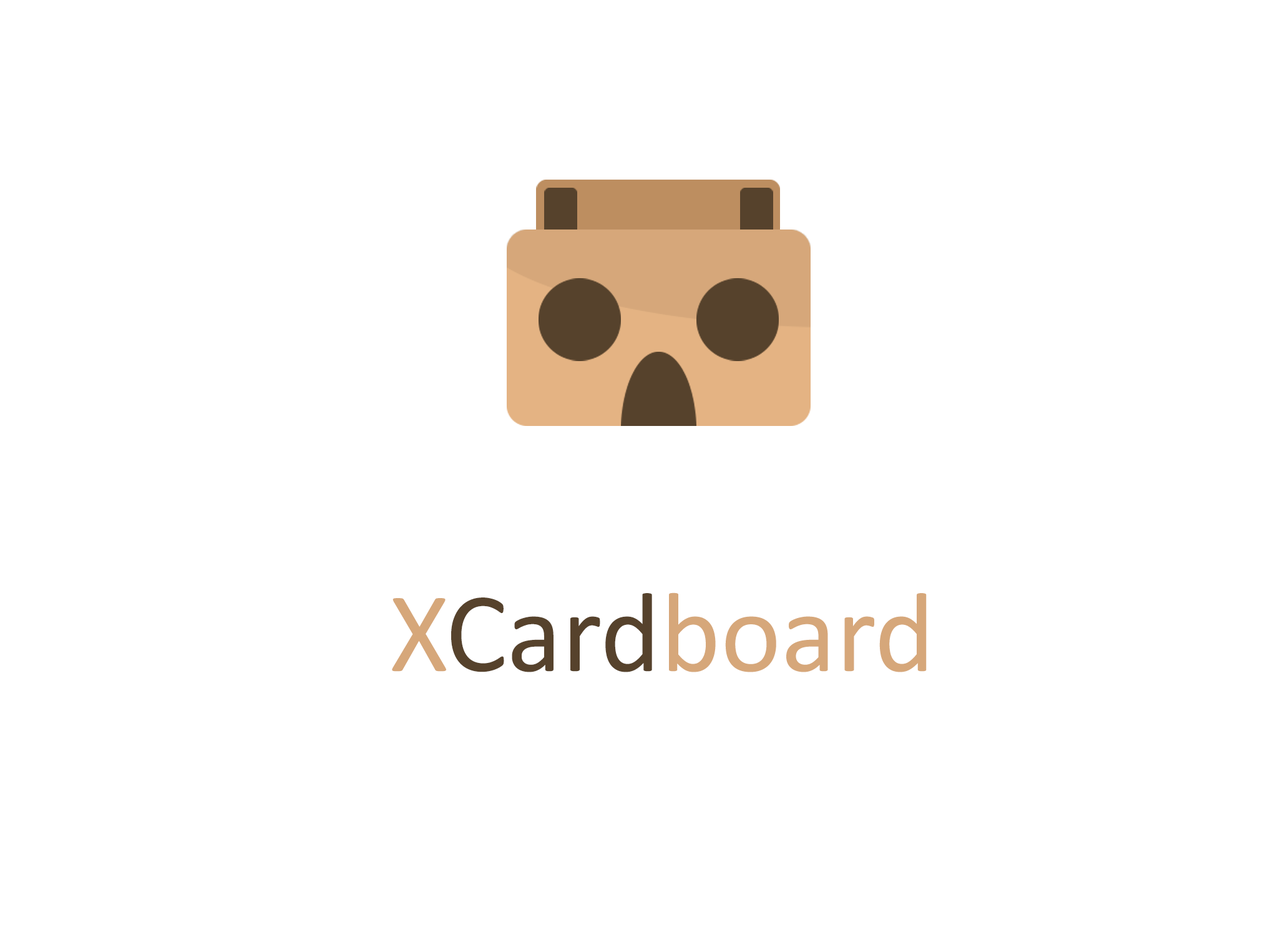
<style>
.page{position:relative;width:1278px;height:933px;background:#ffffff}
.page>*{position:absolute;margin:0}
.t1{font:114.4px "Calibri";color:#d6a77a}
.t2{font:114.4px "Calibri";color:#56422c}
</style>
<div class="page">
<p class="t1" style="left:392px;top:593px;width:534px;height:80px">X<span class="t2">Card</span>board</p>
</div>
